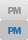
<style>
.page{position:relative;width:28px;height:40px;background:#c1c1c1}
.page>*{position:absolute;margin:0}
.t1{font:10px "MyriadPro-Bold";letter-spacing:-0.05em;color:#919191}
.t2{font:10px "MyriadPro-Bold";letter-spacing:-0.05em;color:#276fac}
</style>
<div class="page">
<p class="t1" style="left:8px;top:7px;width:13px;height:7px">PM</p>
<p class="t2" style="left:8px;top:27px;width:13px;height:7px">PM</p>
</div>
